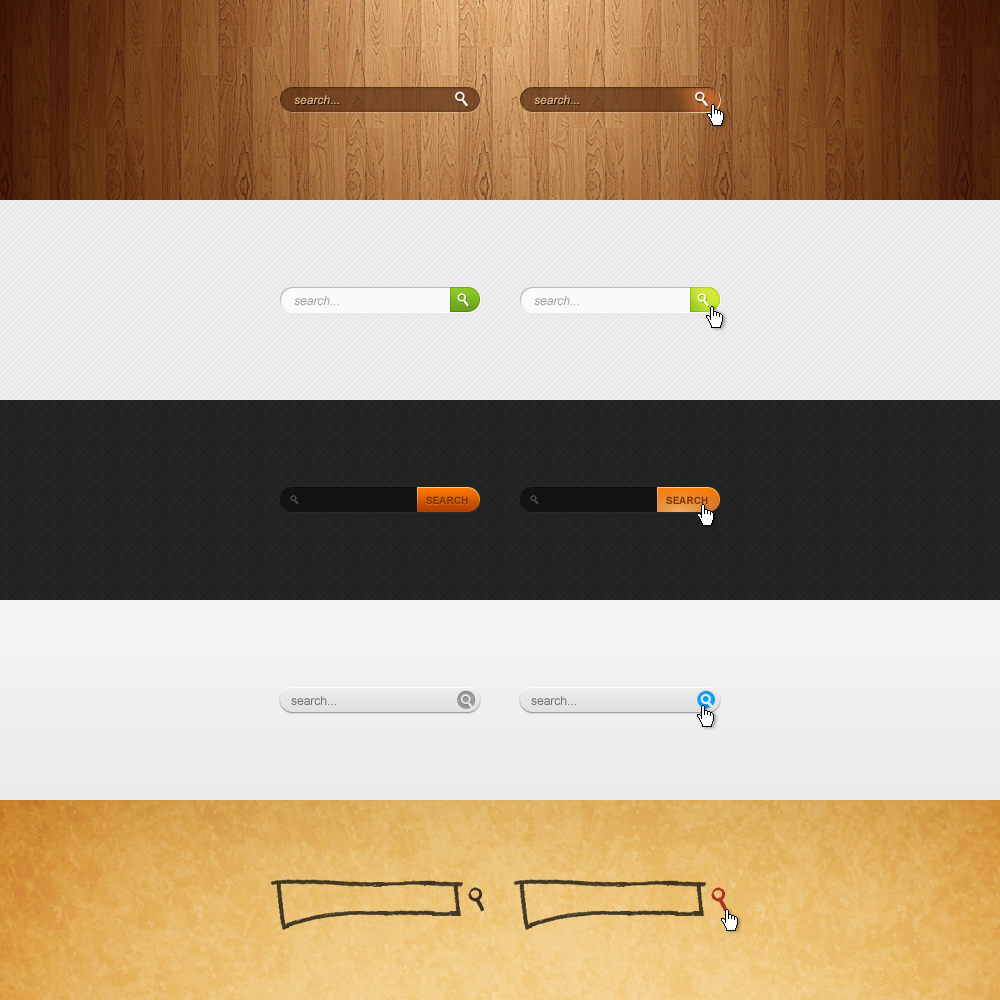
<style>
.page{position:relative;width:1000px;height:1000px}
.page>*{position:absolute;margin:0}
.t1{font:12px "Arial-ItalicMT";color:#ddae82}
.t2{font:12px "Arial-ItalicMT";color:#deb083}
.t3{font:12px "Arial-ItalicMT";color:#9f9f9f}
.t4{font:10px "Arial-BoldMT";color:#79310c;text-transform:uppercase}
.t5{font:12px "ArialMT";color:#6c6c6c}
</style>
<div class="page">
<p class="t1" style="left:294px;top:95px;width:45px;height:10px">search...</p>
<p class="t2" style="left:534px;top:95px;width:45px;height:10px">search...</p>
<p class="t3" style="left:294px;top:296px;width:45px;height:10px">search...</p>
<p class="t3" style="left:534px;top:296px;width:45px;height:10px">search...</p>
<p class="t4" style="left:426px;top:496px;width:42px;height:8px">search</p>
<p class="t4" style="left:666px;top:496px;width:42px;height:8px">search</p>
<p class="t5" style="left:291px;top:696px;width:45px;height:9px">search...</p>
<p class="t5" style="left:531px;top:696px;width:45px;height:9px">search...</p>
</div>
